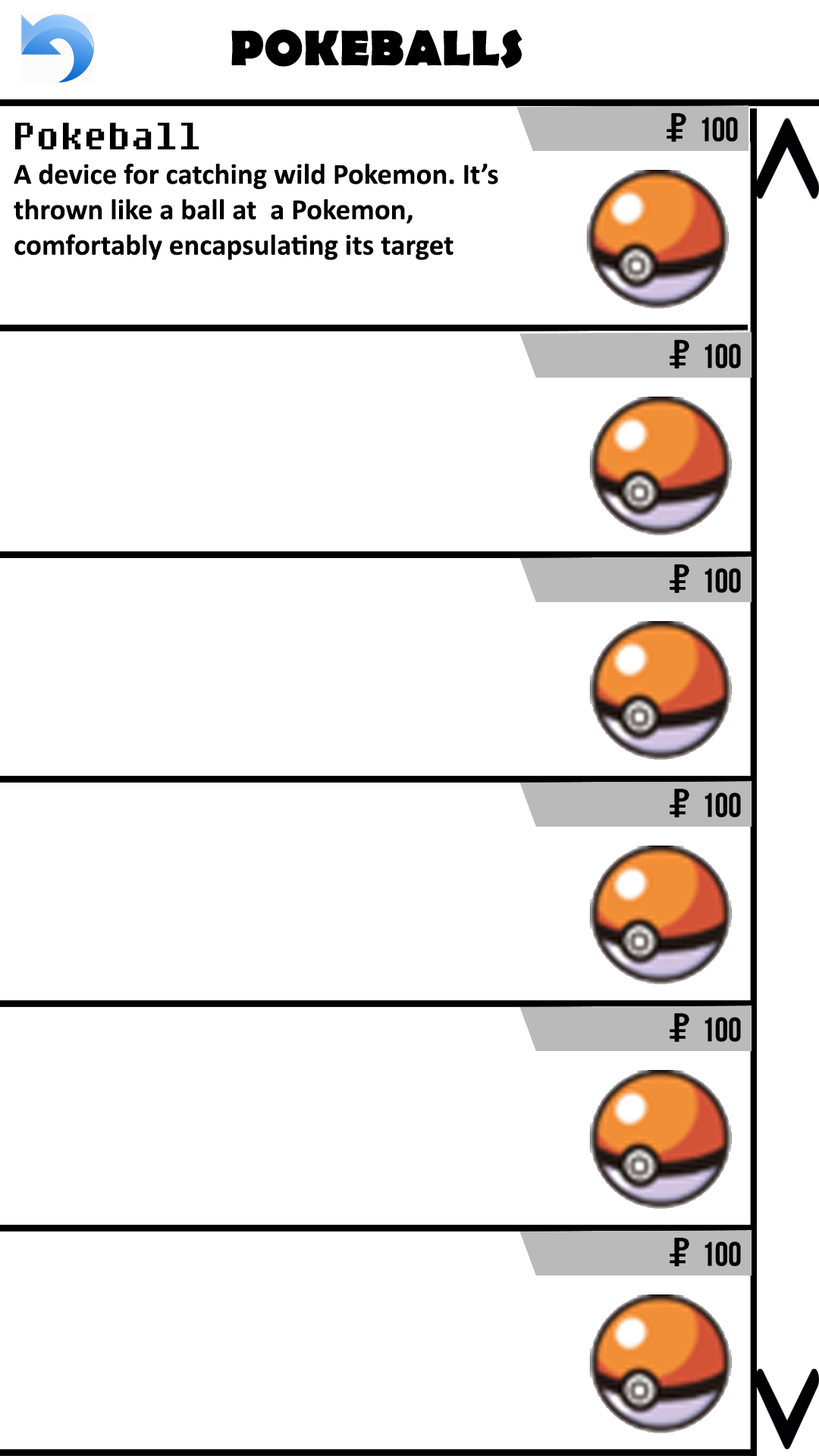
<style>
.page{position:relative;width:819px;height:1456px;background:#ffffff}
.page>*{position:absolute;margin:0}
.t1{font:50.6px "BerlinSansFB-Bold";color:#000000}
.t2{font:37.9px "Fixedsys";color:#000000}
.t3{font:29.5px "Calibri-Bold";color:#000000}
</style>
<div class="page">
<p class="t1" style="left:231px;top:30px;width:291px;height:38px">POKEBALLS</p>
<p class="t2" style="left:15px;top:122px;width:184px;height:27px">Pokeball</p>
<p class="t3" style="left:14px;top:163px;width:484px;height:97px">A device for catching wild Pokemon. It’s thrown like a ball at  a Pokemon, <br>comfortably encapsulating its target</p>
</div>
